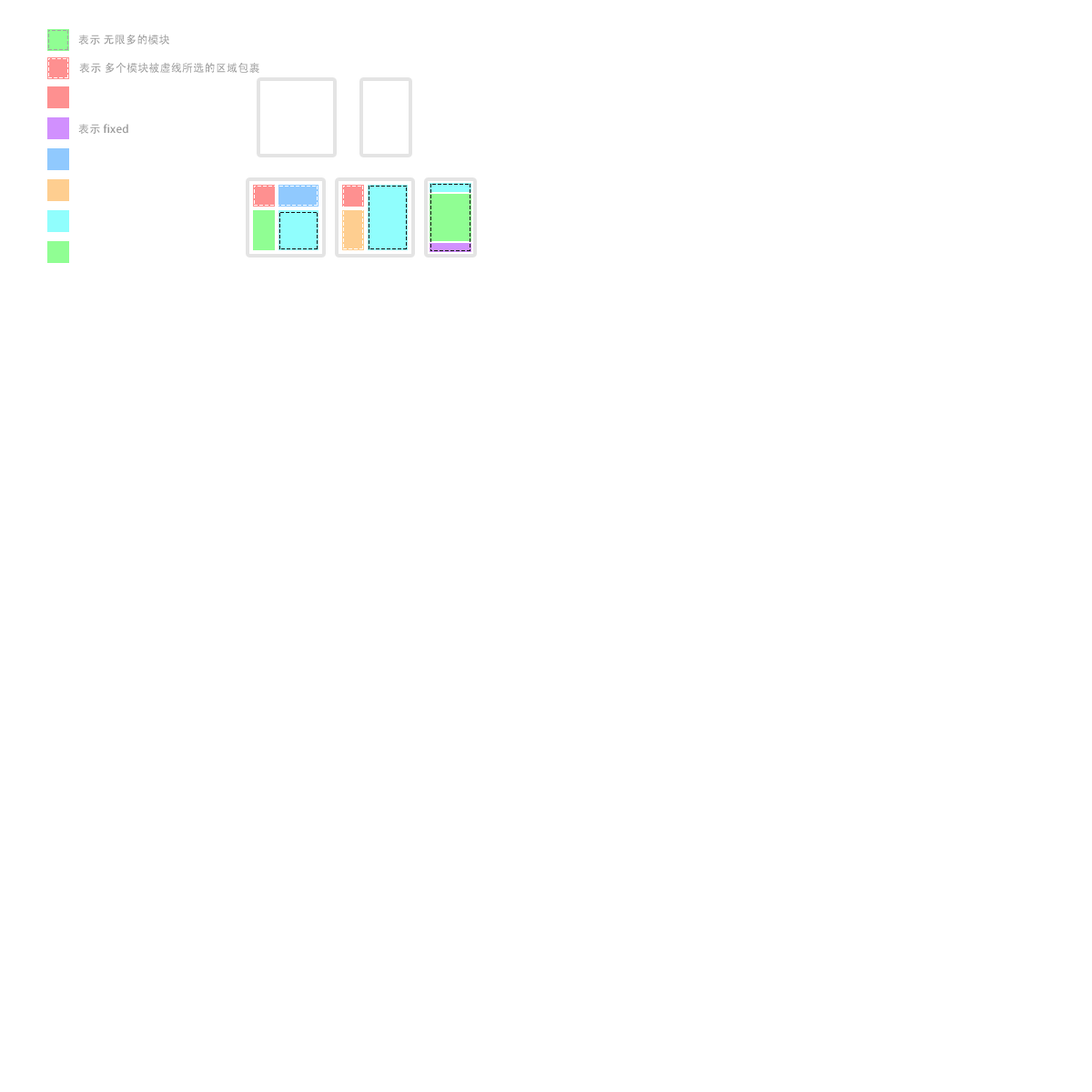
<style>
.page{position:relative;width:1092px;height:1092px;background:#ffffff}
.page>*{position:absolute;margin:0}
.t1{font:10.9px "AdobeHeitiStd-Regular";letter-spacing:0.02em;color:#999999}
</style>
<div class="page">
<p class="t1" style="left:78px;top:34px;width:91px;height:11px">表示 无限多的模块</p>
<p class="t1" style="left:79px;top:62px;width:180px;height:11px">表示 多个模块被虚线所选的区域包裹</p>
<p class="t1" style="left:78px;top:124px;width:50px;height:10px">表示 fixed</p>
</div>
